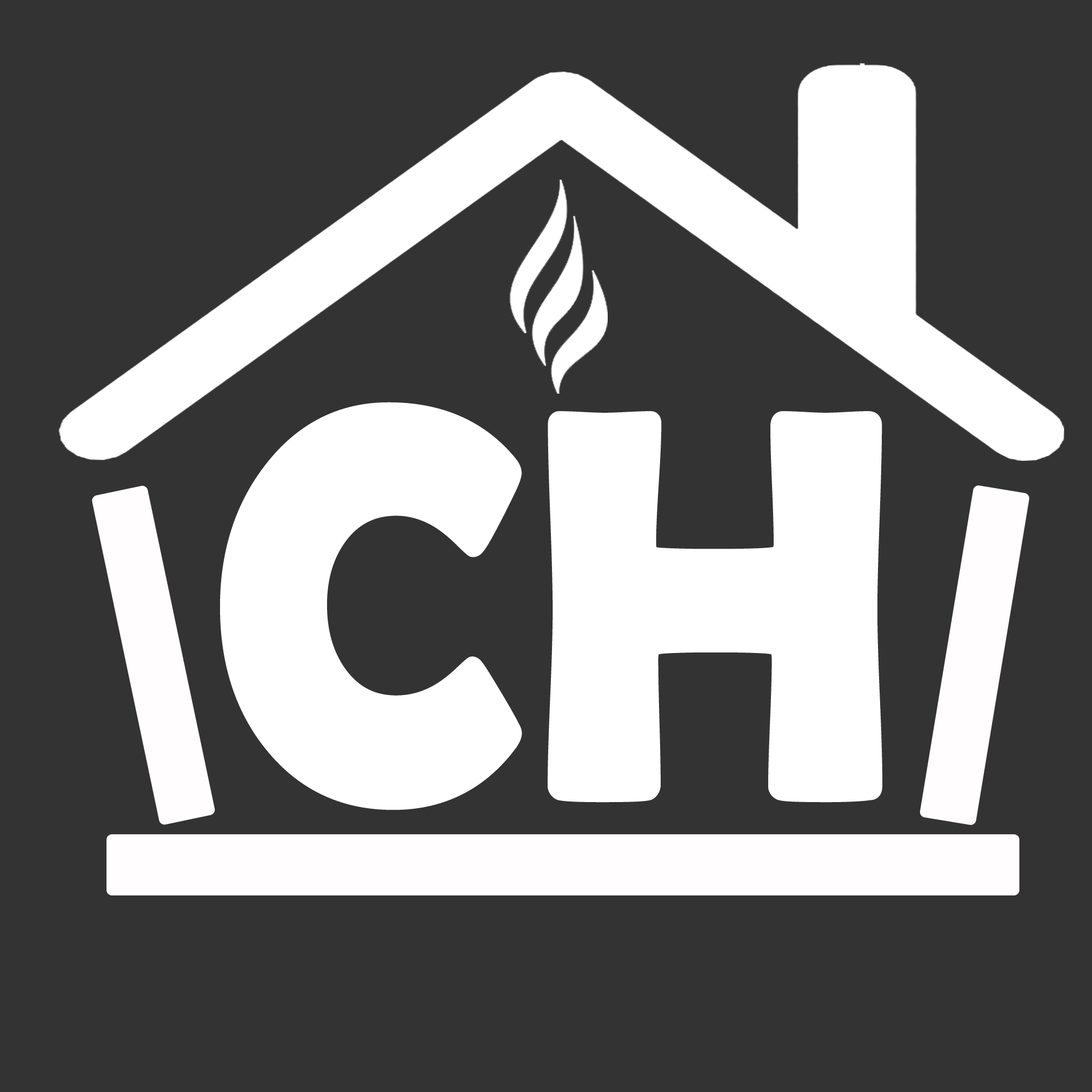
<style>
.page{position:relative;width:1092px;height:1092px;background:#333333}
.page>*{position:absolute;margin:0}
.t1{font:546.7px "BerlinSansFBDemi-Bold";color:#ffffff;font-weight:bold;scale:0.9 1}
</style>
<div class="page">
<p class="t1" style="left:220px;top:402px;width:662px;height:408px">CH</p>
</div>
